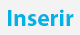
<style>
.page{position:relative;width:80px;height:35px;background:#f4f3f3}
.page>*{position:absolute;margin:0}
.t1{font:23.5px "MyriadPro-Bold";color:#00b2e8}
</style>
<div class="page">
<p class="t1" style="left:8px;top:9px;width:66px;height:17px">Inserir</p>
</div>
